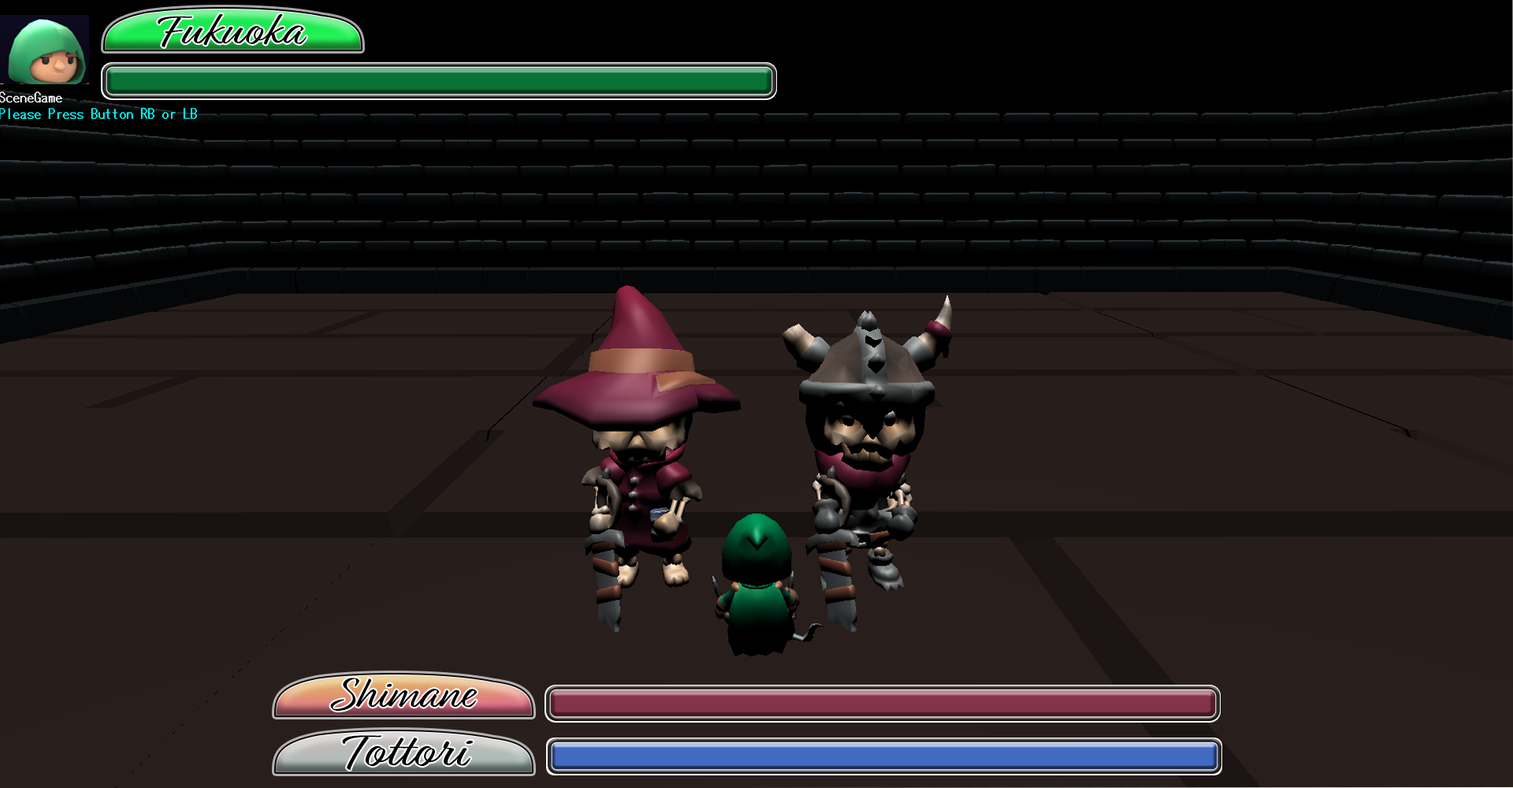
<style>
.page{position:relative;width:1513px;height:788px;background:#271e1b}
.page>*{position:absolute;margin:0}
.t1{font:45.1px "Relation";color:#000000;scale:1.14 1}
.t2{font:46.2px "Relation";color:#000000;scale:1.04 1}
.t3{font:50px "Relation";color:#000000;scale:1.17 1}
</style>
<div class="page">
<p class="t1" style="left:158px;top:14px;width:149px;height:33px">Fukuoka</p>
<p class="t2" style="left:330px;top:678px;width:148px;height:34px">Shimane</p>
<p class="t3" style="left:342px;top:735px;width:132px;height:35px">Tottori</p>
</div>
